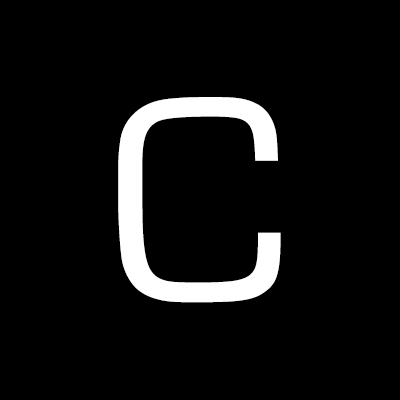
<style>
.page{position:relative;width:400px;height:400px;background:#000000}
.page>*{position:absolute;margin:0}
.t1{font:301.4px "MicroSquare";color:#ffffff}
</style>
<div class="page">
<p class="t1" style="left:118px;top:97px;width:163px;height:206px">C</p>
</div>
